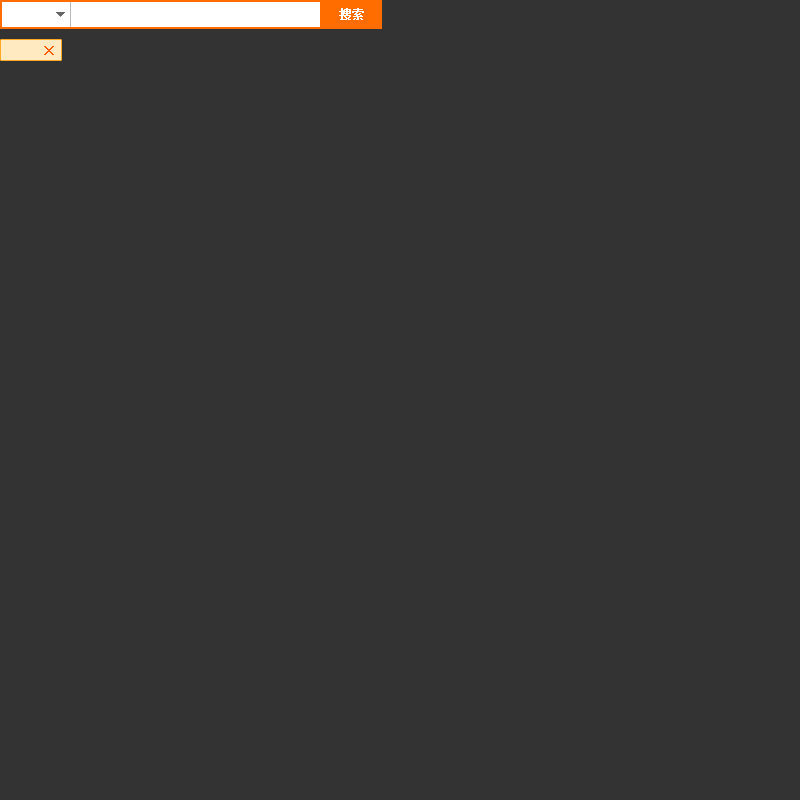
<style>
.page{position:relative;width:800px;height:800px;background:#333333}
.page>*{position:absolute;margin:0}
.t1{font:12px "SimSun";color:#ffffff;font-weight:bold}
</style>
<div class="page">
<p class="t1" style="left:339px;top:8px;width:25px;height:12px">搜索</p>
</div>
